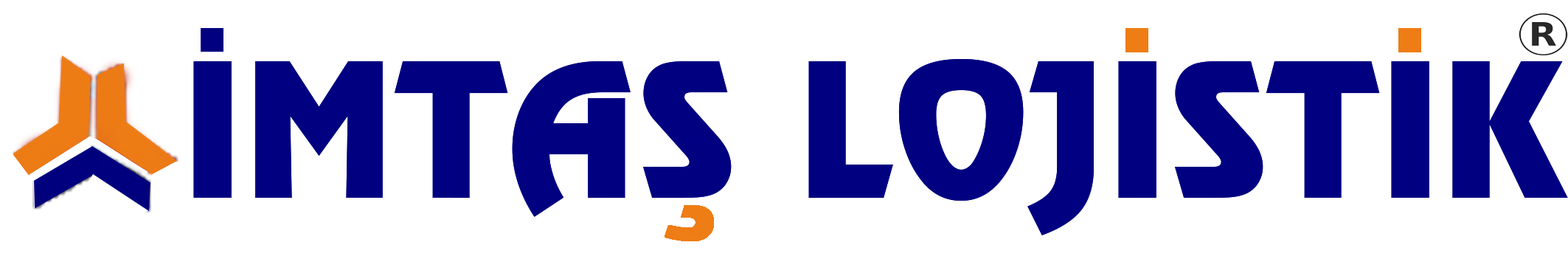
<style>
.page{position:relative;width:1568px;height:259px;background:#ffffff}
.page>*{position:absolute;margin:0}
.t1{font:184.4px "RevueBT-Regular";color:#000080}
</style>
<div class="page">
<p class="t1" style="left:193px;top:28px;width:1375px;height:213px">İMTAŞ LOJİSTİK</p>
</div>
